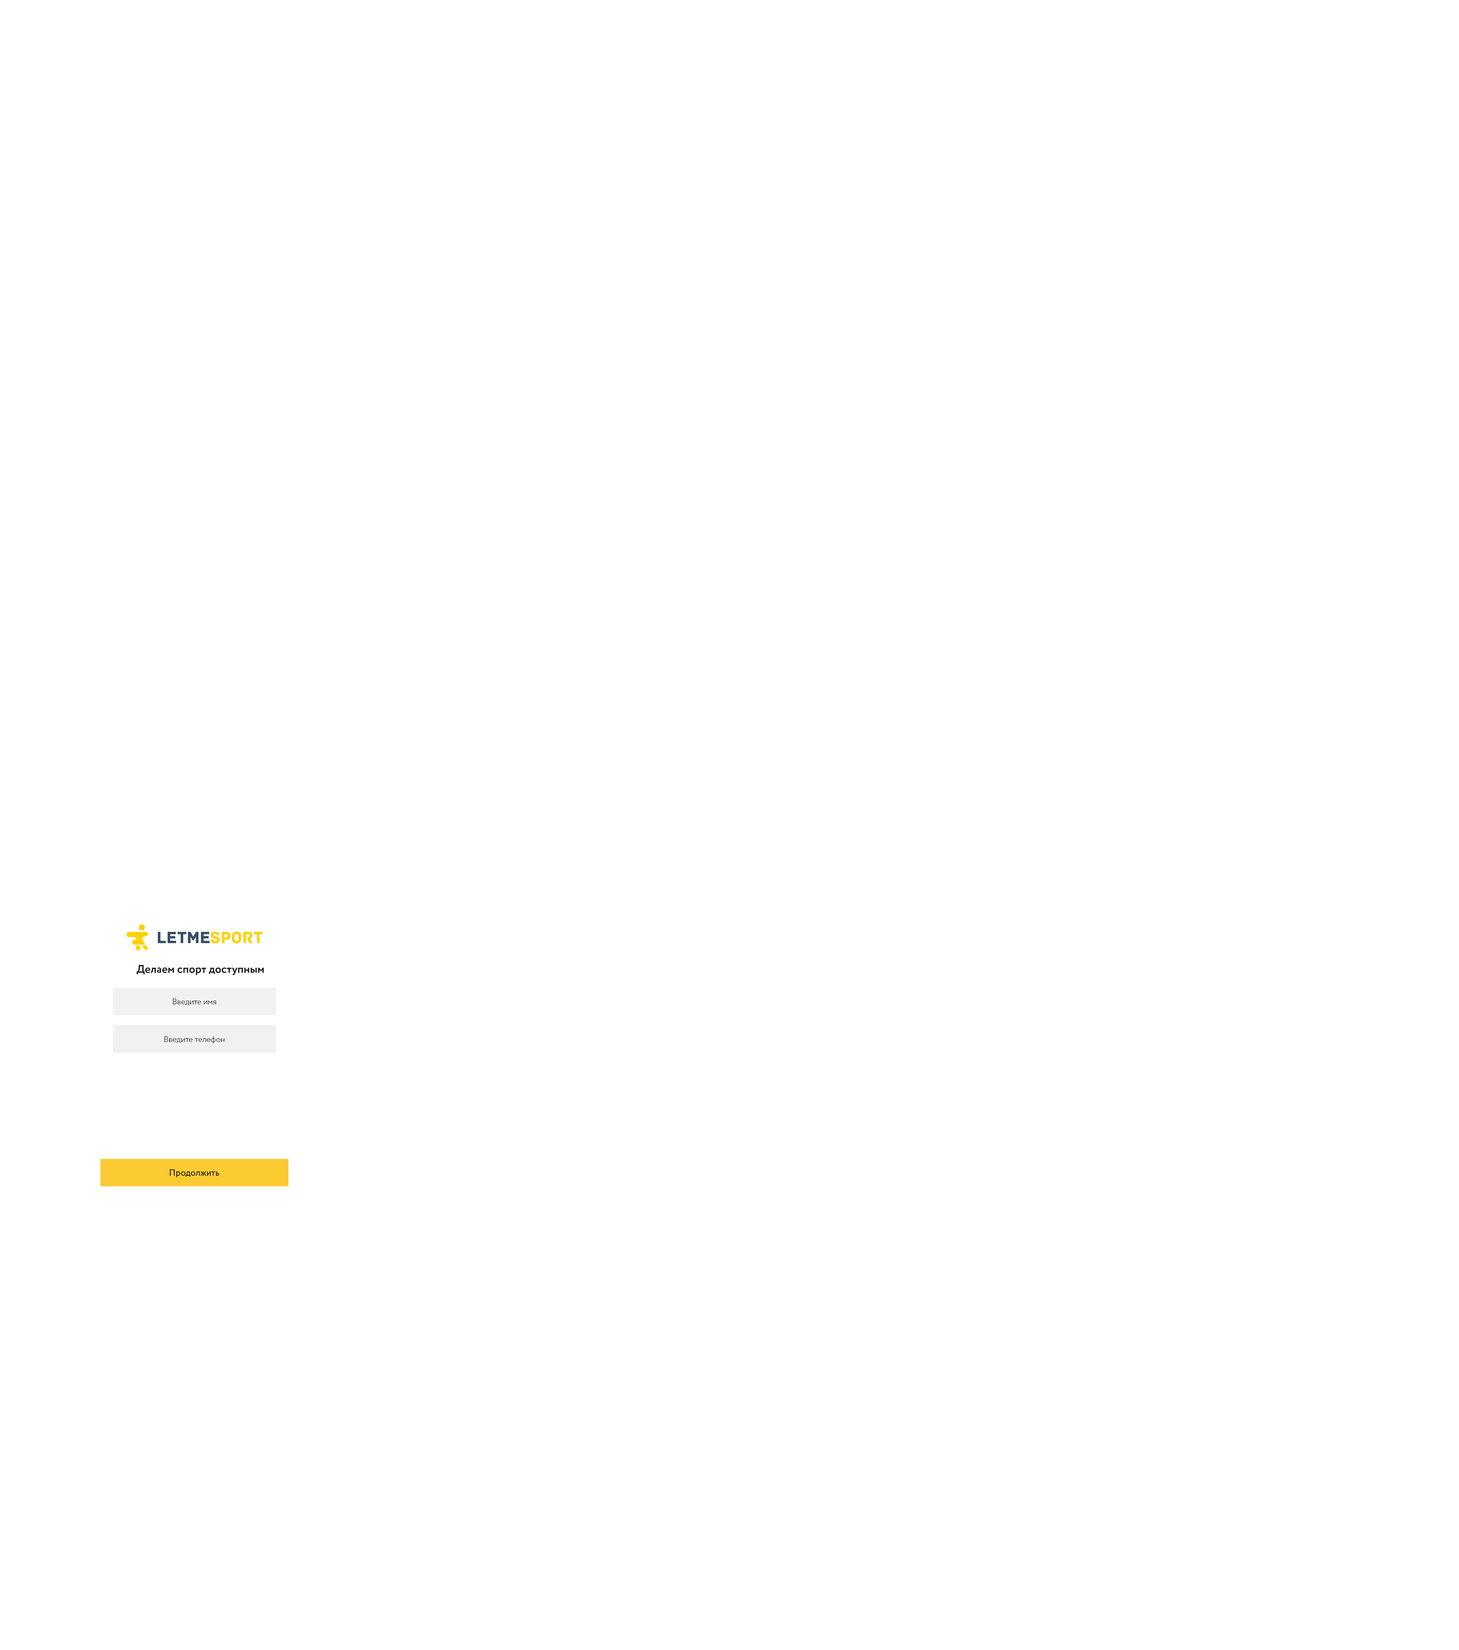
<style>
.page{position:relative;width:1459px;height:1650px;background:#ffffff}
.page>*{position:absolute;margin:0}
.t1{font:17.1px "Archive";color:#364e66}
.t2{font:17.1px "Archive";color:#ffd109}
.t3{font:11.3px "Circe-Bold";color:#1f1f1f}
.t4{font:8px "Circe-Light";color:#000000}
.t5{font:9px "Circe-Regular";color:#000000}
</style>
<div class="page">
<p class="t1" style="left:158px;top:932px;width:105px;height:12px">LetMe<span class="t2">Sport</span></p>
<p class="t3" style="left:136px;top:965px;width:128px;height:10px">Делаем спорт доступным</p>
<p class="t4" style="left:173px;top:999px;width:43px;height:7px">Введите имя</p>
<p class="t4" style="left:164px;top:1037px;width:60px;height:7px">Введите телефон</p>
<p class="t5" style="left:170px;top:1170px;width:49px;height:8px">Продолжить</p>
</div>
